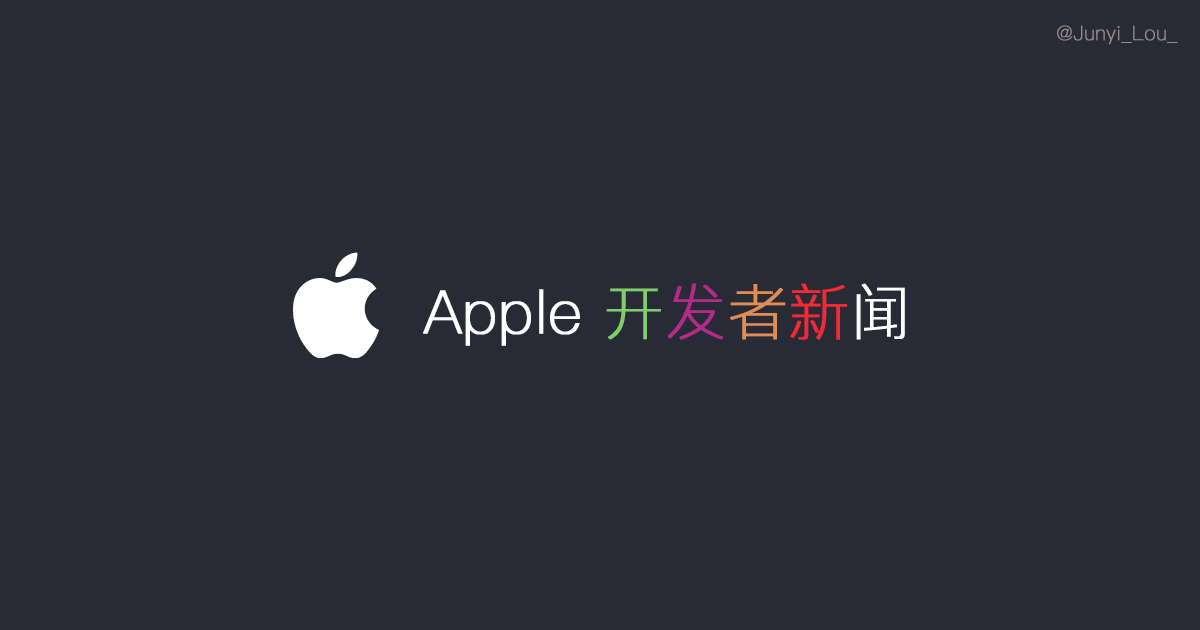
<style>
.page{position:relative;width:1200px;height:630px;background:#282a36}
.page>*{position:absolute;margin:0}
.t1{font:20px "PingFangSC-Thin";color:#998d8d;font-weight:bold}
.t2{font:60px "PingFangSC-Thin";color:#ffffff;font-weight:bold}
.t3{font:60px "PingFangSC-Thin";color:#7fcd6c;font-weight:bold}
.t4{font:60px "PingFangSC-Thin";color:#b41289;font-weight:bold}
.t5{font:60px "PingFangSC-Thin";color:#de8d54;font-weight:bold}
.t6{font:60px "PingFangSC-Thin";color:#f22327;font-weight:bold}
</style>
<div class="page">
<p class="t1" style="left:1057px;top:25px;width:121px;height:20px">@Junyi_Lou_</p>
<p class="t2" style="left:423px;top:283px;width:482px;height:63px">Apple <span class="t3">开</span><span class="t4">发</span><span class="t5">者</span><span class="t6">新</span>闻</p>
</div>
